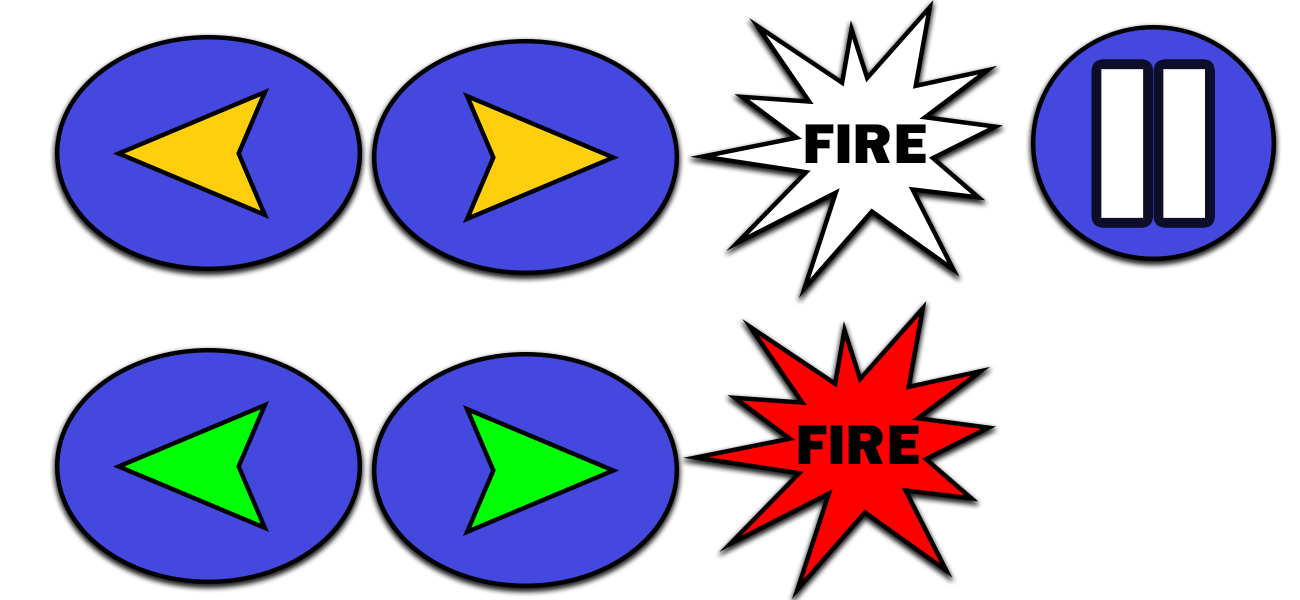
<style>
.page{position:relative;width:1300px;height:600px;background:#ffffff}
.page>*{position:absolute;margin:0}
.t1{font:333.3px "FranklinGothic-Heavy";color:#ffffff;scale:0.92 1}
.t2{font:58.3px "FranklinGothic-Heavy";color:#000000}
</style>
<div class="page">
<p class="t1" style="left:1101px;top:69px;width:104px;height:149px;rotate:90deg">=</p>
<p class="t2" style="left:805px;top:124px;width:121px;height:39px">FIRE</p>
<p class="t2" style="left:798px;top:425px;width:121px;height:39px">FIRE</p>
</div>
